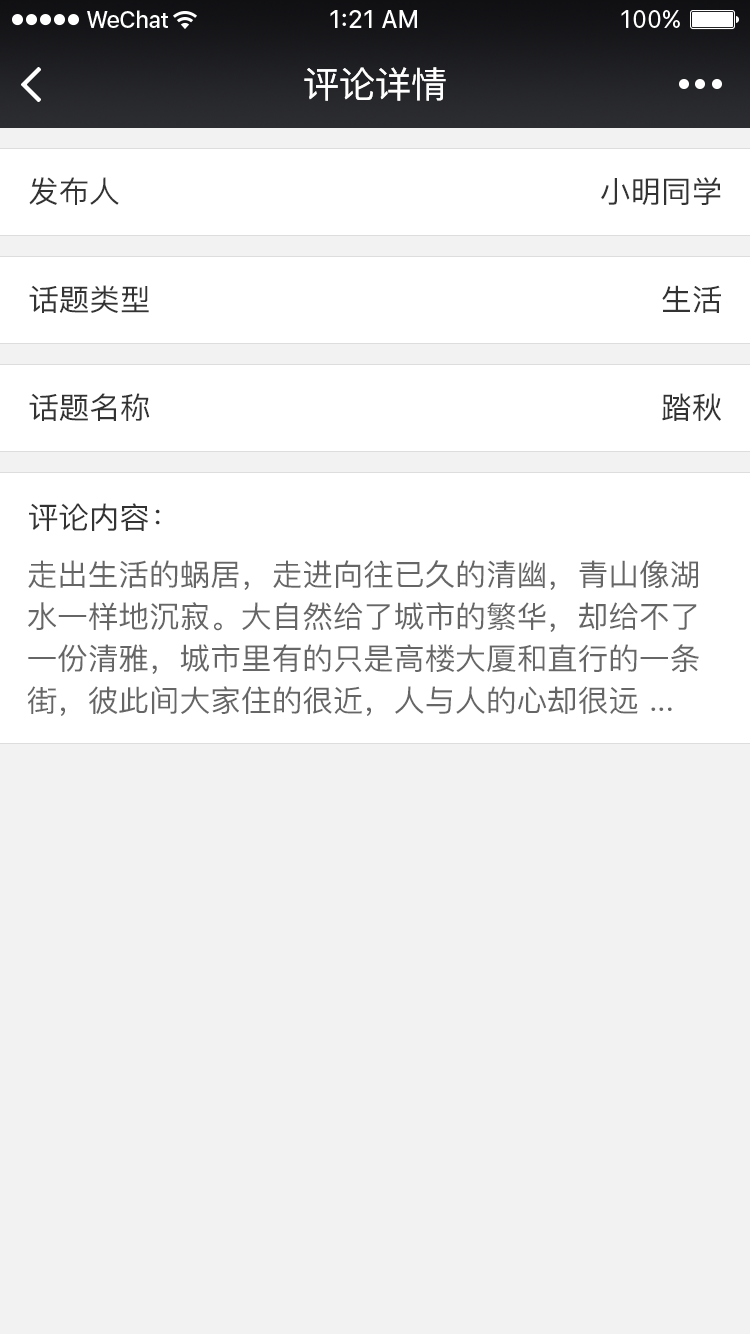
<style>
.page{position:relative;width:750px;height:1334px;background:#f2f2f2}
.page>*{position:absolute;margin:0}
.t1{font:36px "PingFang-SC-Medium";color:#ffffff}
.t2{font:30px "PingFang-SC-Medium";color:#333333}
.t3{font:30px/42px "PingFang-SC-Medium";color:#666666}
</style>
<div class="page">
<p class="t1" style="left:304px;top:67px;width:142px;height:34px">评论详情</p>
<p class="t2" style="left:29px;top:177px;width:90px;height:28px">发布人</p>
<p class="t2" style="left:601px;top:177px;width:120px;height:28px">小明同学</p>
<p class="t2" style="left:29px;top:285px;width:120px;height:28px">话题类型</p>
<p class="t2" style="left:662px;top:285px;width:59px;height:28px">生活</p>
<p class="t2" style="left:29px;top:393px;width:121px;height:28px">话题名称</p>
<p class="t2" style="left:662px;top:393px;width:59px;height:28px">踏秋</p>
<p class="t2" style="left:29px;top:503px;width:131px;height:28px">评论内容：</p>
<p class="t3" style="left:27px;top:560px;width:672px;height:156px">走出生活的蜗居，走进向往已久的清幽，青山像湖<br>水一样地沉寂。大自然给了城市的繁华，却给不了<br>一份清雅，城市里有的只是高楼大厦和直行的一条<br>街，彼此间大家住的很近，人与人的心却很远 ...</p>
</div>
